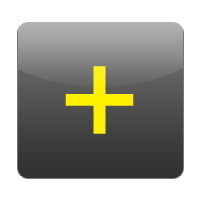
<style>
.page{position:relative;width:200px;height:200px;background:#ffffff}
.page>*{position:absolute;margin:0}
.t1{font:142px "ArialMT";letter-spacing:0.1em;color:#fff000}
</style>
<div class="page">
<p class="t1" style="left:65px;top:66px;width:69px;height:68px">+</p>
</div>
